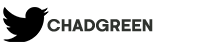
<style>
.page{position:relative;width:198px;height:52px;background:#ffffff}
.page>*{position:absolute;margin:0}
.t1{font:15.8px "Kamerik205-Regular3";color:#2f322e;text-transform:uppercase;font-weight:bold}
</style>
<div class="page">
<p class="t1" style="left:47px;top:19px;width:106px;height:13px">ChadGreen</p>
</div>
